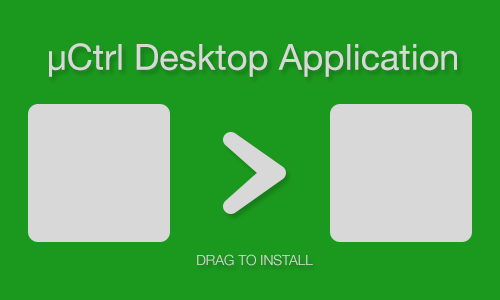
<style>
.page{position:relative;width:500px;height:300px;background:#1b991e}
.page>*{position:absolute;margin:0}
.t1{font:36px "HelveticaNeue";color:#d8d8d8}
.t2{font:14px "HelveticaNeue-Light";color:#d8d8d8}
</style>
<div class="page">
<p class="t1" style="left:49px;top:43px;width:408px;height:34px">µCtrl Desktop Application</p>
<p class="t2" style="left:197px;top:254px;width:116px;height:12px">DRAG TO INSTALL</p>
</div>
